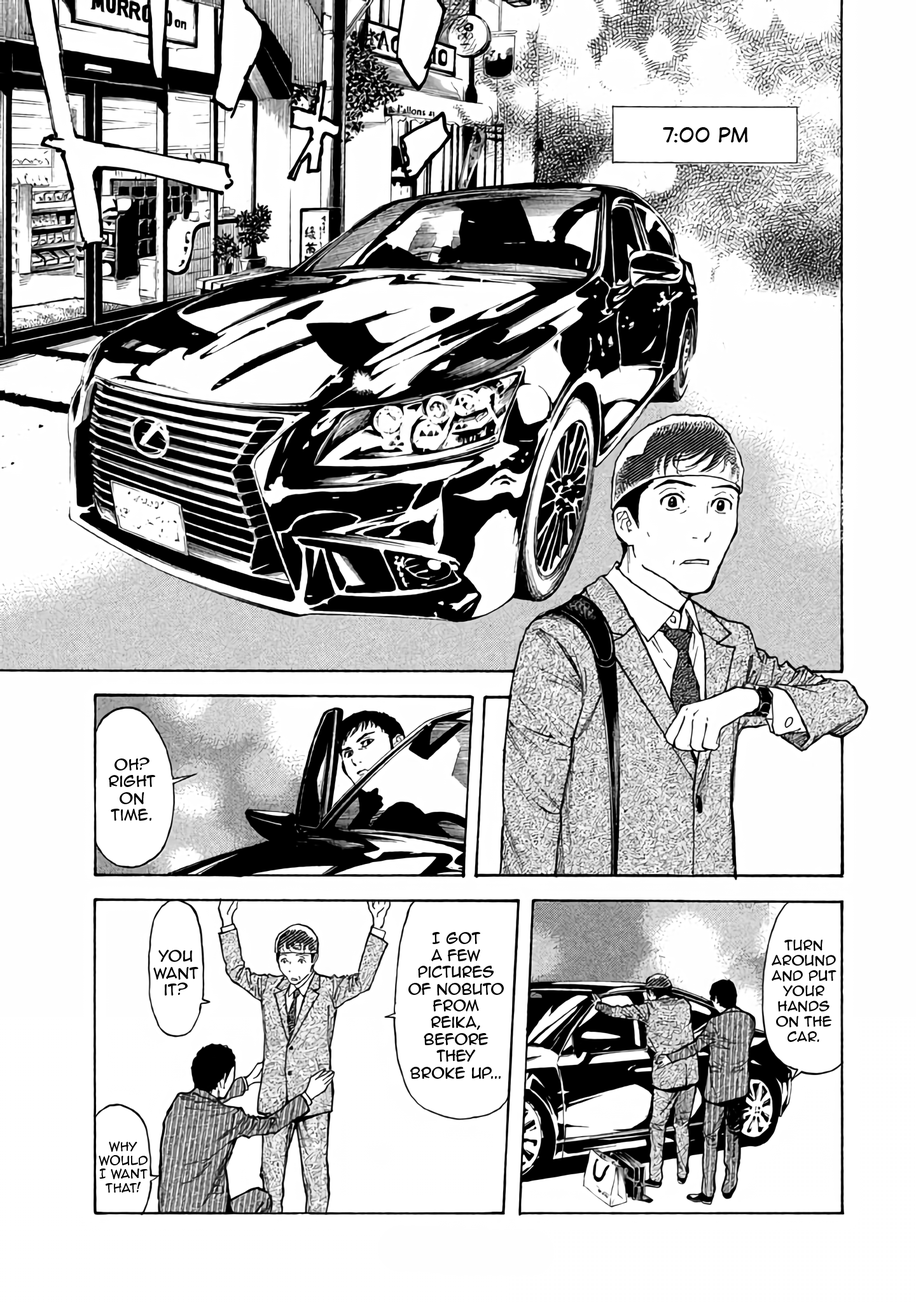
<style>
.page{position:relative;width:916px;height:1302px;background:#ffffff}
.page>*{position:absolute;margin:0}
.t1{font:19.1px "DigitalStrip";color:#000000}
.t2{font:14px "AnimeAce2.0BB";color:#000000}
.t3{font:12.7px "AnimeAce2.0BB";color:#000000}
.t4{font:11.4px "AnimeAce2.0BB";color:#000000}
</style>
<div class="page">
<p class="t1" style="left:663px;top:127px;width:85px;height:15px">7:00 PM</p>
<p class="t2" style="left:109px;top:757px;width:46px;height:64px;text-align:center">Oh? Right on time.</p>
<p class="t2" style="left:408px;top:932px;width:96px;height:147px;text-align:center">I got a few pictures of nobuto from reika, before they broke up...</p>
<p class="t3" style="left:771px;top:940px;width:65px;height:102px;text-align:center">Turn around  and put your hands on the car.</p>
<p class="t2" style="left:153px;top:950px;width:45px;height:46px;text-align:center">You want it?</p>
<p class="t4" style="left:99px;top:1141px;width:49px;height:52px;text-align:center">why would I want that!</p>
</div>
